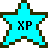
<style>
.page{position:relative;width:48px;height:48px;background:#00ffff}
.page>*{position:absolute;margin:0}
.t1{font:20px "Fixedsys";color:#000000}
</style>
<div class="page">
<p class="t1" style="left:18px;top:21px;width:14px;height:9px">XP</p>
</div>
